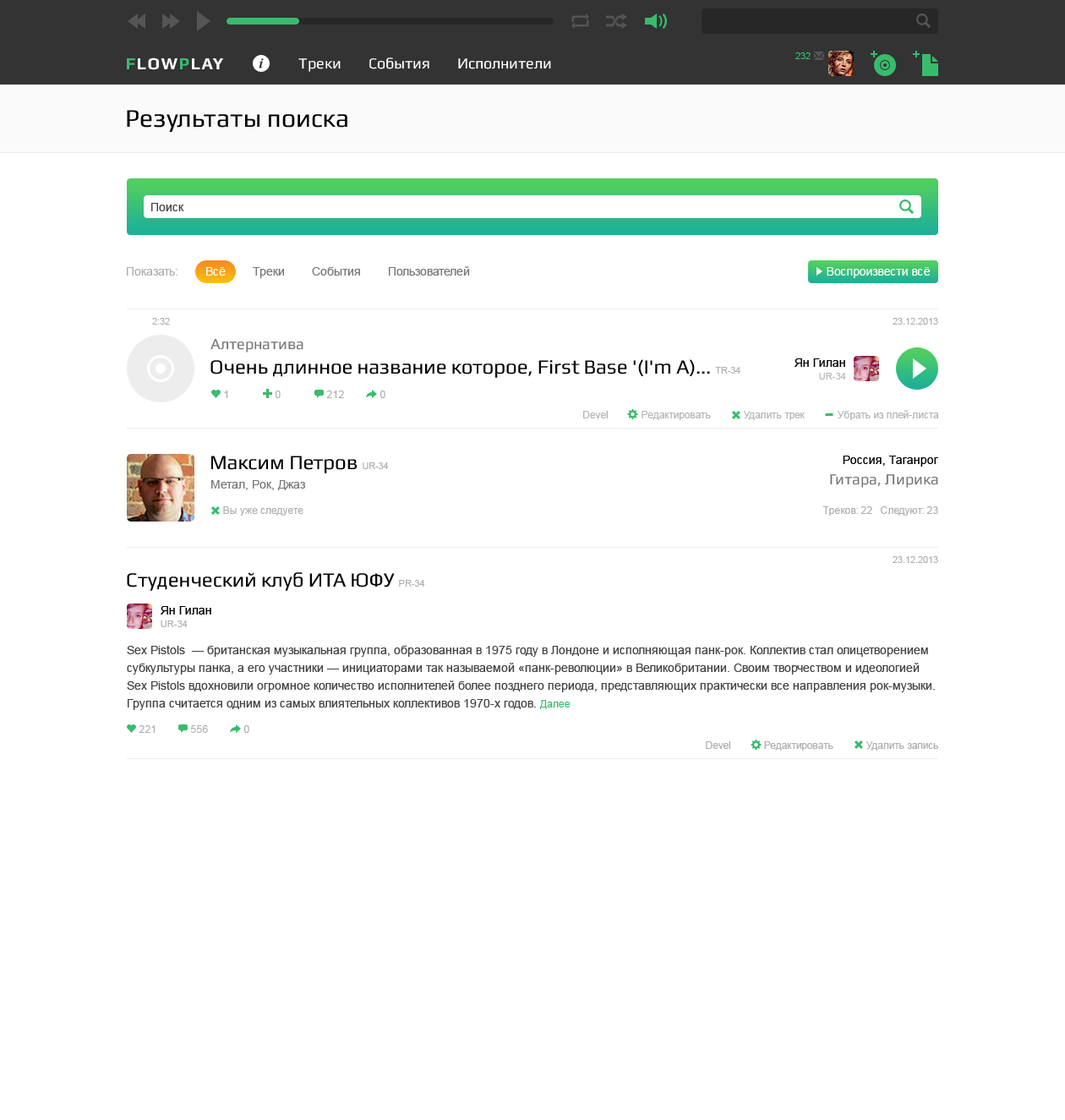
<style>
.page{position:relative;width:1065px;height:1120px;background:#ffffff}
.page>*{position:absolute;margin:0}
.t1{font:25.4px "Play";color:#000000}
.t2{font:11.8px "ArialMT";color:#444444}
.t3{font:11.8px "ArialMT";color:#777777}
.t4{font:11.8px "ArialMT";color:#afafaf}
.t5{font:11.8px "ArialMT";color:#ffffff}
.t6{font:9.3px "ArialMT";color:#afafaf}
.t7{font:15.2px "Play";color:#777777}
.t8{font:20.3px "Play";color:#000000}
.t9{font:11.8px/12.7px "ArialMT";color:#000000}
.t10{font:9.3px/12.7px "ArialMT";color:#b5b5b5}
.t11{font:10.1px "ArialMT";color:#afafaf}
.t12{font:10.1px "ArialMT";color:#b5b5b5}
.t13{font:11.8px "ArialMT";color:#000000}
.t14{font:9.3px/12.7px "ArialMT";color:#afafaf}
.t15{font:11.8px/17.7px "ArialMT";color:#444444}
.t16{font:10.1px/17.7px "ArialMT";color:#37bc6c}
</style>
<div class="page">
<p class="t1" style="left:127px;top:110px;width:220px;height:22px">Результаты поиска</p>
<p class="t2" style="left:151px;top:203px;width:33px;height:8px">Поиск</p>
<p class="t3" style="left:127px;top:266px;width:343px;height:12px"><span class="t4">Показать:        </span><span class="t5">Всё</span>        Треки        События        Пользователей</p>
<p class="t5" style="left:827px;top:267px;width:103px;height:11px">Воспроизвести всё</p>
<p class="t6" style="left:152px;top:318px;width:18px;height:7px">2:32</p>
<p class="t6" style="left:892px;top:318px;width:46px;height:7px">23.12.2013</p>
<p class="t7" style="left:210px;top:339px;width:93px;height:13px">Алтернатива</p>
<p class="t8" style="left:210px;top:359px;width:530px;height:19px">Очень длинное название которое, First Base '(I'm A)... <span class="t6">TR-34</span></p>
<p class="t9" style="left:794px;top:358px;width:52px;height:21px;text-align:right">Ян Гилан<br><span class="t10">UR-34</span></p>
<p class="t11" style="left:224px;top:390px;width:4px;height:8px">1</p>
<p class="t11" style="left:275px;top:390px;width:6px;height:8px">0</p>
<p class="t11" style="left:326px;top:390px;width:18px;height:8px">212</p>
<p class="t11" style="left:379px;top:390px;width:6px;height:8px">0</p>
<p class="t12" style="left:583px;top:410px;width:356px;height:10px">Devel           Редактировать           Удалить трек           Убрать из плей-листа</p>
<p class="t8" style="left:211px;top:456px;width:178px;height:17px">Максим Петров <span class="t6">UR-34</span></p>
<p class="t13" style="left:843px;top:456px;width:95px;height:11px">Россия, Таганрог</p>
<p class="t3" style="left:210px;top:480px;width:95px;height:10px">Метал, Рок, Джаз</p>
<p class="t7" style="left:830px;top:474px;width:108px;height:14px">Гитара, Лирика</p>
<p class="t11" style="left:223px;top:506px;width:80px;height:10px">Вы уже следуете</p>
<p class="t11" style="left:822px;top:506px;width:116px;height:10px">Треков: 22   Следуют: 23</p>
<p class="t6" style="left:892px;top:556px;width:46px;height:7px">23.12.2013</p>
<p class="t8" style="left:127px;top:572px;width:298px;height:19px">Студенческий клуб ИТА ЮФУ <span class="t6">PR-34</span></p>
<p class="t9" style="left:161px;top:606px;width:50px;height:21px">Ян Гилан<br><span class="t14">UR-34</span></p>
<p class="t15" style="left:127px;top:645px;width:808px;height:65px">Sex Pistols  — британская музыкальная группа, образованная в 1975 году в Лондоне и исполняющая панк-рок. Коллектив стал олицетворением субкультуры панка, а его участники — инициаторами так называемой «панк-революции» в Великобритании. Своим творчеством и идеологией Sex Pistols вдохновили огромное количество исполнителей более позднего периода, представляющих практически все направления рок-музыки. Группа считается одним из самых влиятельных коллективов 1970-х годов. <span class="t16">Далее</span></p>
<p class="t11" style="left:139px;top:725px;width:17px;height:8px">221</p>
<p class="t11" style="left:190px;top:725px;width:18px;height:8px">556</p>
<p class="t11" style="left:243px;top:725px;width:6px;height:8px">0</p>
<p class="t11" style="left:706px;top:741px;width:232px;height:9px">Devel           Редактировать           Удалить запись</p>
</div>
